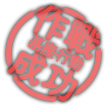
<style>
.page{position:relative;width:109px;height:109px;background:#ffffff}
.page>*{position:absolute;margin:0}
.t1{font:35px/24px "GothicMB101Pr6N-Medium";color:#ee7070;font-weight:bold}
.t2{font:16.5px "GothicMB101Pr6N-Medium";color:#ee7070;font-weight:bold;scale:0.88 1}
</style>
<div class="page">
<p class="t1" style="left:7px;top:5px;width:93px;height:96px;text-align:center;rotate:27deg">做戰<br><br>成功</p>
<p class="t2" style="left:27px;top:34px;width:57px;height:38px;rotate:27deg">基座行動</p>
</div>
